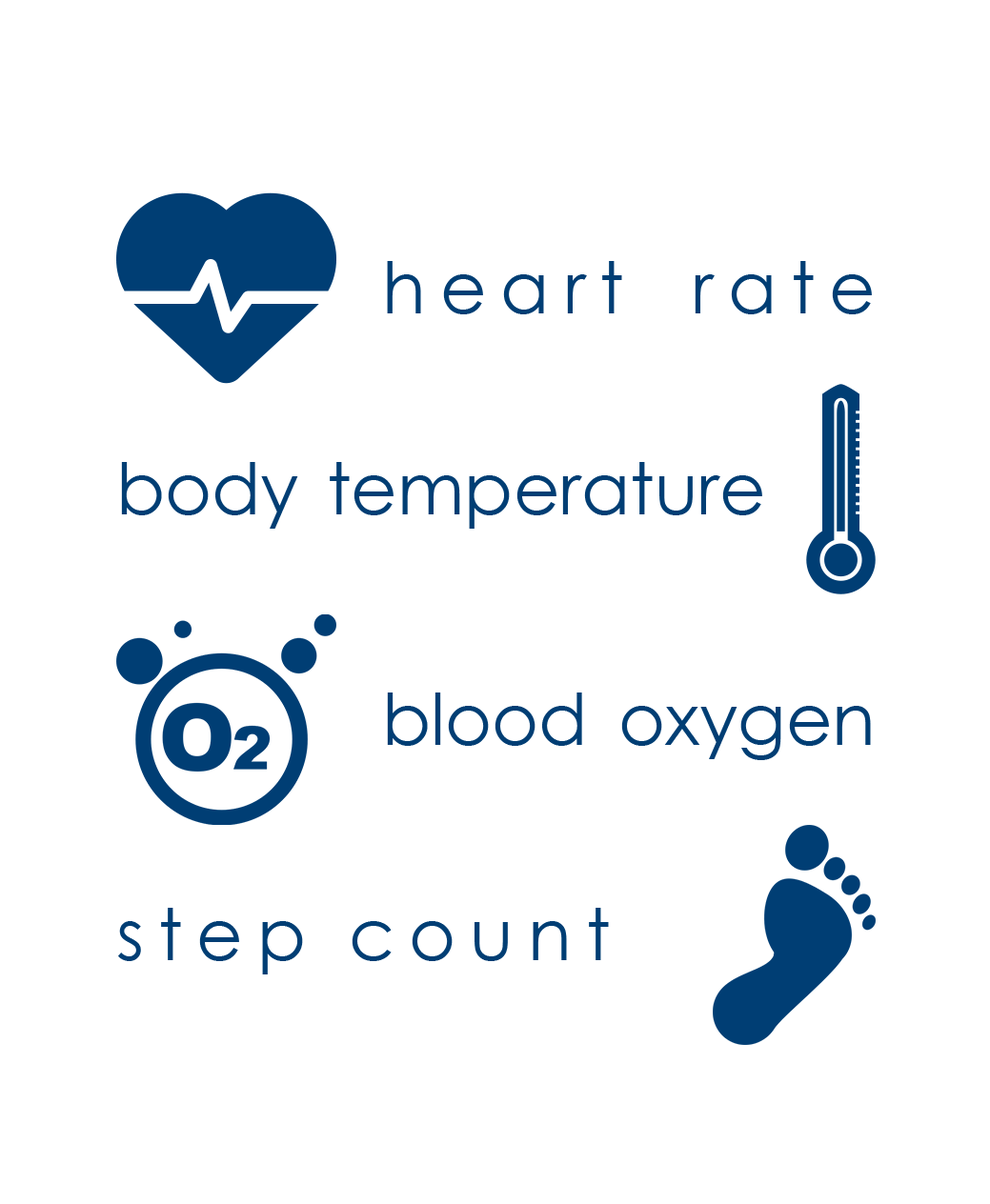
<style>
.page{position:relative;width:990px;height:1204px;background:#ffffff}
.page>*{position:absolute;margin:0}
.t1{font:71.5px "CenturyGothic";letter-spacing:0.2em;color:#173c70}
.t2{font:71.5px "CenturyGothic";color:#173c70}
</style>
<div class="page">
<p class="t1" style="left:387px;top:261px;width:485px;height:53px">heart rate</p>
<p class="t2" style="left:121px;top:462px;width:641px;height:67px">body temperature</p>
<p class="t2" style="left:387px;top:693px;width:484px;height:67px">blood oxygen</p>
<p class="t1" style="left:118px;top:908px;width:491px;height:67px">step count</p>
</div>
